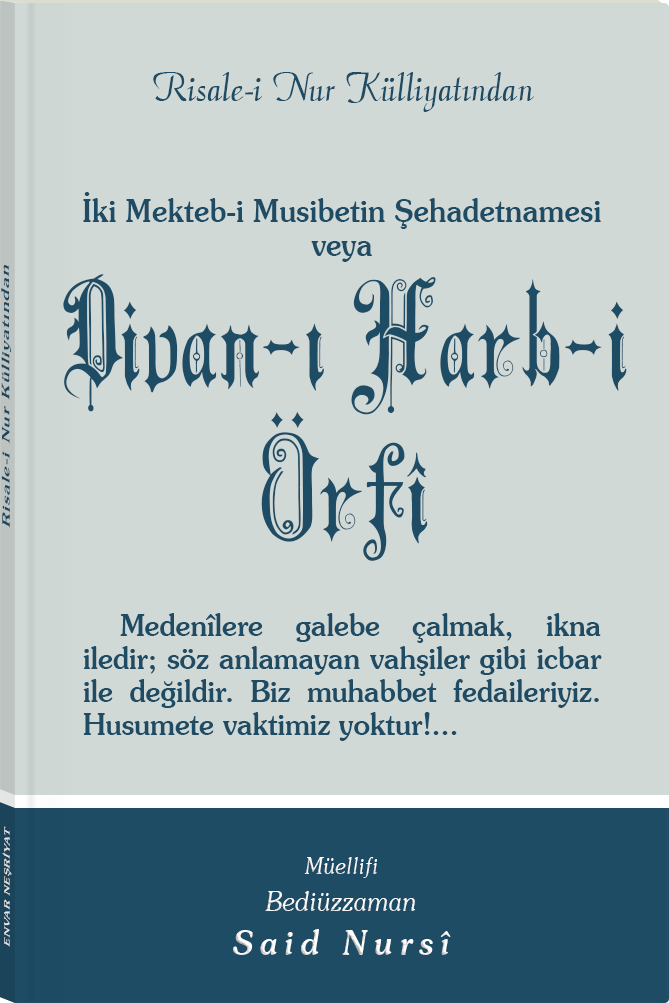
<style>
.page{position:relative;width:669px;height:1003px;background:#d1d9d7}
.page>*{position:absolute;margin:0}
.t1{font:45.3px "Barla © 072 Aria ScriptScriptSSi";color:#1e4c65;scale:0.94 1}
.t2{font:31.8px/34.7px "Souvenir-Medium";color:#1e4c65;scale:0.92 1}
.t3{font:11.4px "Souvenir-Medium";letter-spacing:0.08em;color:#1e4c65;scale:1.65 1}
.t4{font:142px/126.7px "Barla © 001 Liva Nur";letter-spacing:-0.001em;color:#1e4c65;scale:0.93 1}
.t5{font:142px/153.1px "Barla © 001 Liva Nur";letter-spacing:-0.001em;color:#1e4c65;scale:0.93 1}
.t6{font:30.3px/33px "Souvenir-Medium";color:#1e4c65;scale:0.92 1}
.t7{font:8.3px "Souvenir-Medium";letter-spacing:0.08em;color:#e5e5e5;scale:1.43 1}
.t8{font:27.1px/37.8px "Souvenir-LightItalic";color:#ffffff;scale:0.92 1}
.t9{font:22.8px/39.8px "Souvenir-LightItalic";color:#ffffff;scale:0.92 1}
.t10{font:33.9px/43.8px "Souvenir-MediumItalic";letter-spacing:0.2em;color:#ffffff;scale:0.92 1}
</style>
<div class="page">
<p class="t1" style="left:153px;top:72px;width:381px;height:40px">Risale-i Nur Külliyatından</p>
<p class="t2" style="left:83px;top:192px;width:518px;height:70px;text-align:center">İki Mekteb-i Musibetin Şehadetnamesi<br>veya</p>
<p class="t3" style="left:1px;top:265px;width:10px;height:263px;rotate:-90deg">Risale-i Nur Külliyatından</p>
<p class="t4" style="left:63px;top:274px;width:564px;height:287px;text-align:center">Divan-ı Harb-i<br><span class="t5">Örfî</span></p>
<p class="t6" style="left:83px;top:613px;width:519px;height:128px;text-align:justify">Medenîlere galebe çalmak, ikna iledir; söz anlamayan vahşiler gibi icbar ile değildir. Biz muhabbet fedaileriyiz. Husumete vaktimiz yoktur!...</p>
<p class="t7" style="left:2px;top:826px;width:10px;height:121px;rotate:-90deg">ENVAR NEŞRİYAT</p>
<p class="t8" style="left:233px;top:857px;width:218px;height:98px;text-align:center"><span class="t9">Müellifi<br></span>Bediüzzaman<br><span class="t10">Said Nursî</span></p>
</div>
